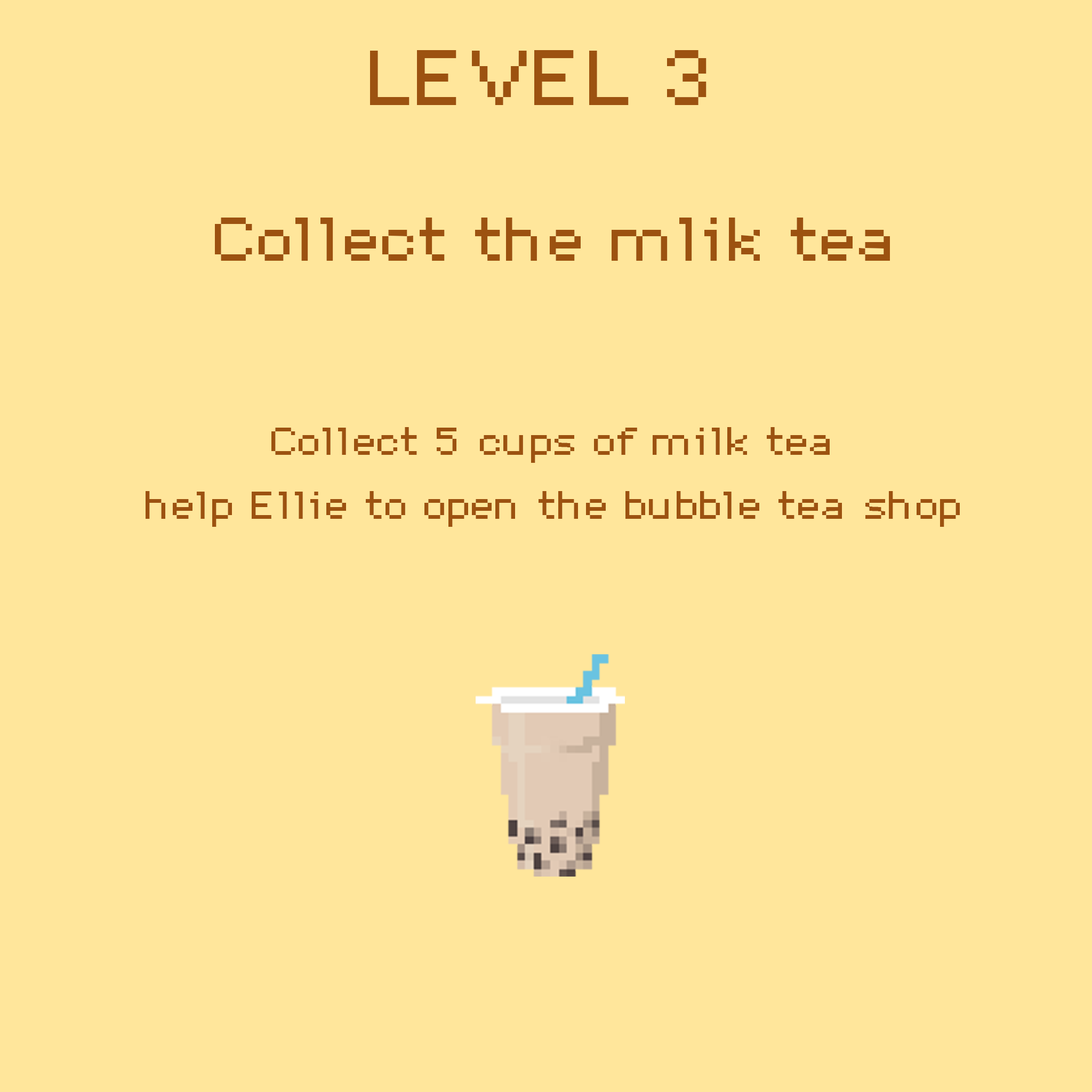
<style>
.page{position:relative;width:1092px;height:1092px;background:#ffe69b}
.page>*{position:absolute;margin:0}
.t1{font:68.8px "DePixel-Breit";color:#9c5210}
.t2{font:54.6px "DePixel-Breit";color:#9c5210}
.t3{font:34.6px/64px "DePixel-Breit";color:#9c5210}
</style>
<div class="page">
<p class="t1" style="left:370px;top:50px;width:336px;height:55px">LEVEL 3</p>
<p class="t2" style="left:215px;top:218px;width:675px;height:43px">Collect the mlik tea</p>
<p class="t3" style="left:146px;top:427px;width:814px;height:100px;text-align:center">Collect 5 cups of milk tea<br>help Ellie to open the bubble tea shop</p>
</div>
